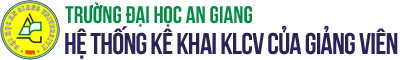
<style>
.page{position:relative;width:400px;height:60px;background:#ffffff}
.page>*{position:absolute;margin:0}
.t1{font:24px "UTM-Bebas";color:#008d41}
.t2{font:30px "UTM-Bebas";letter-spacing:-0.025em;color:#2a2258}
</style>
<div class="page">
<p class="t1" style="left:65px;top:2px;width:187px;height:25px">trường đại học an giang</p>
<p class="t2" style="left:65px;top:25px;width:333px;height:34px">HỆ THỐNG KÊ KHAI KLCV CỦA GIẢNG VIÊN</p>
</div>
